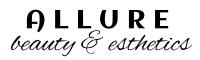
<style>
.page{position:relative;width:200px;height:60px;background:#ffffff}
.page>*{position:absolute;margin:0}
.t1{font:26px "Aclonica-Regular";color:#000000}
.t2{font:30px "AlexBrush-Regular";color:#000000}
</style>
<div class="page">
<p class="t1" style="left:26px;top:9px;width:143px;height:24px">A L L U R E</p>
<p class="t2" style="left:10px;top:30px;width:183px;height:27px">beauty &amp; esthetics</p>
</div>
